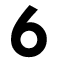
<style>
.page{position:relative;width:64px;height:64px;background:#ffffff}
.page>*{position:absolute;margin:0}
.t1{font:66.7px "(ÇÑ)°¢¸Ó¸®D";color:#000000}
</style>
<div class="page">
<p class="t1" style="left:11px;top:5px;width:36px;height:53px">6</p>
</div>
